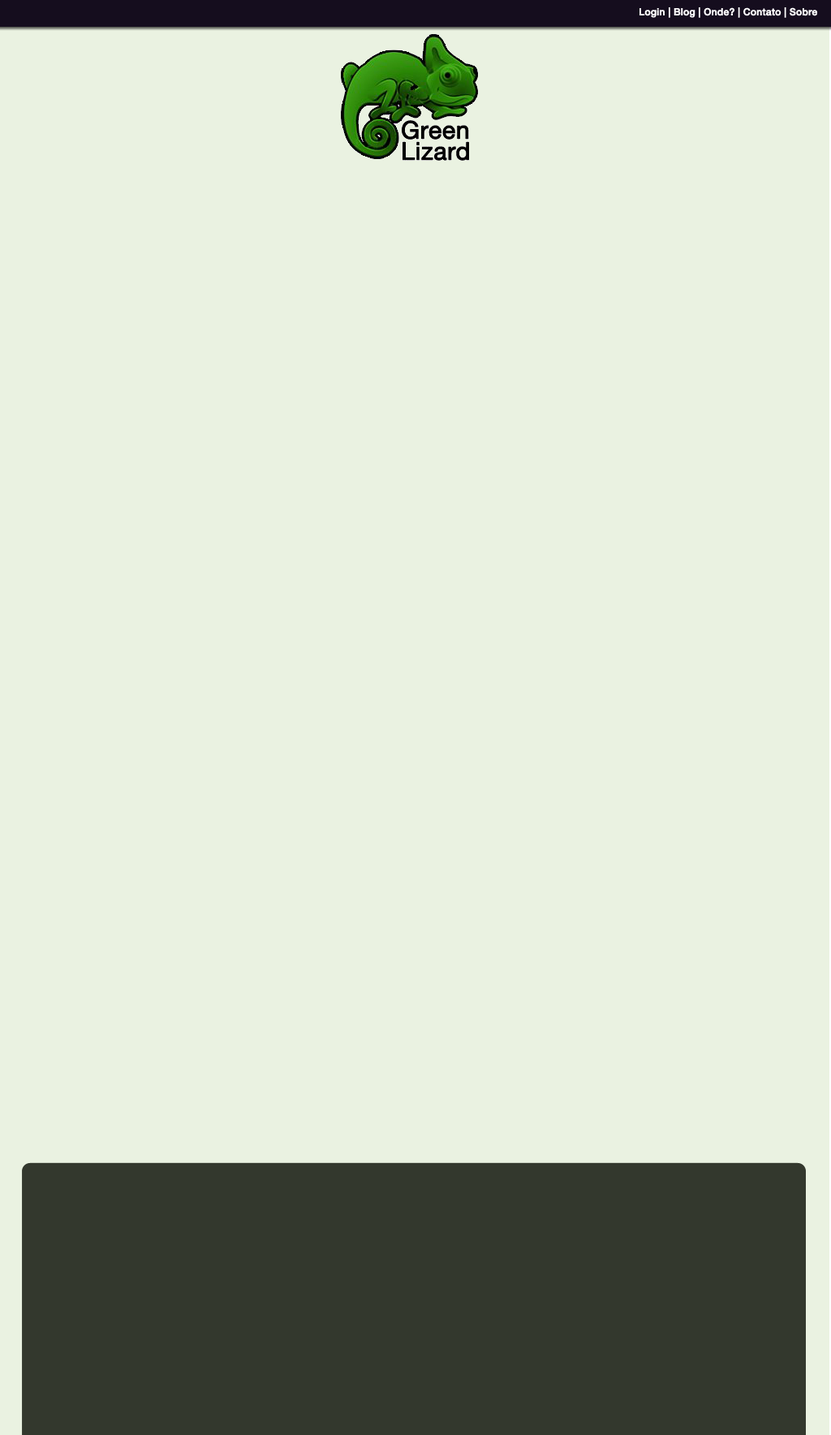
<style>
.page{position:relative;width:831px;height:1435px;background:#eaf2e1}
.page>*{position:absolute;margin:0}
.t1{font:9.7px "HelveticaNeue-Medium";color:#ffffff;font-weight:bold}
</style>
<div class="page">
<p class="t1" style="left:640px;top:7px;width:177px;height:11px">Login | Blog | Onde? | Contato | Sobre</p>
</div>
